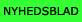
<style>
.page{position:relative;width:82px;height:22px;background:#33ff33}
.page>*{position:absolute;margin:0}
.t1{font:11px "Verdana";color:#000000}
</style>
<div class="page">
<p class="t1" style="left:4px;top:6px;width:75px;height:10px">NYHEDSBLAD</p>
</div>
